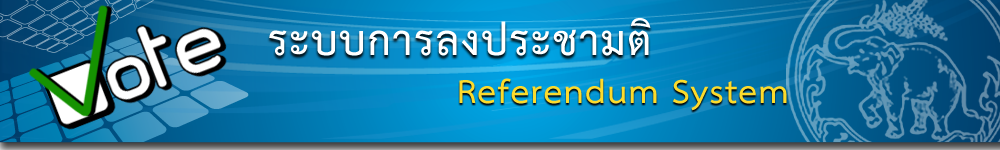
<style>
.page{position:relative;width:1000px;height:150px}
.page>*{position:absolute;margin:0}
.t1{font:60px "THSarabunITù-Bold";letter-spacing:0.025em;color:#ffffff}
.t2{font:48px "THSarabunITù-Bold";letter-spacing:0.025em;color:#fcdb2c}
</style>
<div class="page">
<p class="t1" style="left:269px;top:18px;width:382px;height:38px">ระบบการลงประชามติ</p>
<p class="t2" style="left:459px;top:78px;width:328px;height:33px">Referendum System</p>
</div>
